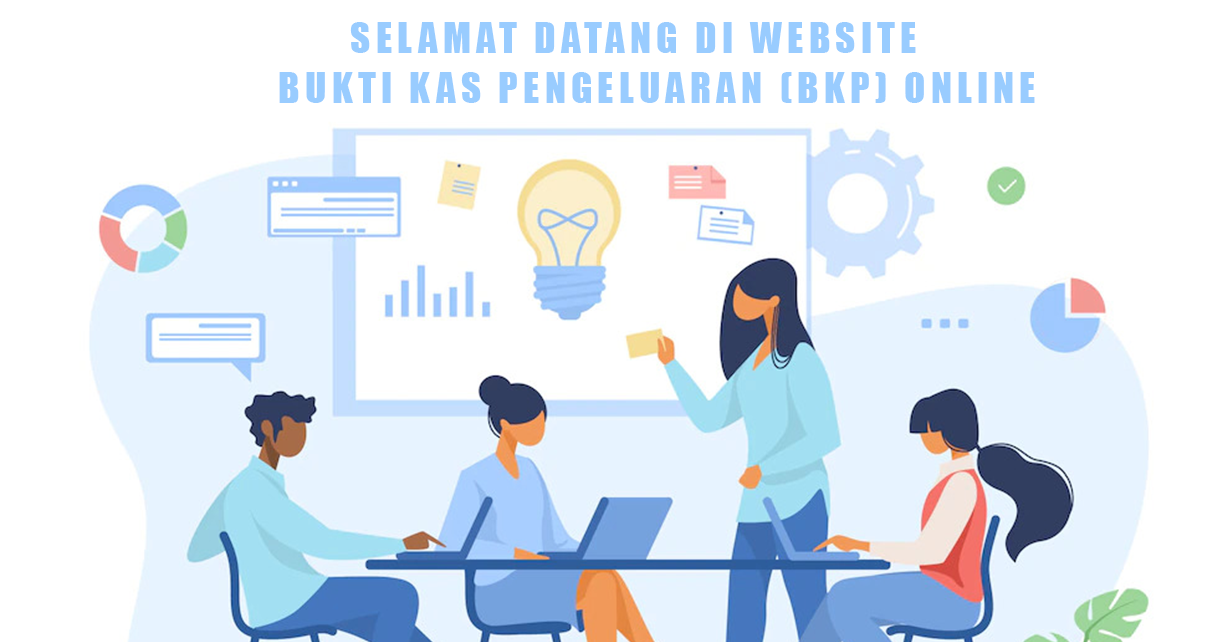
<style>
.page{position:relative;width:1230px;height:642px;background:#ffffff}
.page>*{position:absolute;margin:0}
.t1{font:38.8px "Impact";letter-spacing:0.135em;color:#99ccff;text-transform:uppercase}
</style>
<div class="page">
<p class="t1" style="left:350px;top:22px;width:566px;height:31px">SELAMAT DATANG DI WEBSITE</p>
<p class="t1" style="left:279px;top:72px;width:756px;height:31px">BUKTI KAS PENGELUARAN (bkp) ONLINE</p>
</div>
